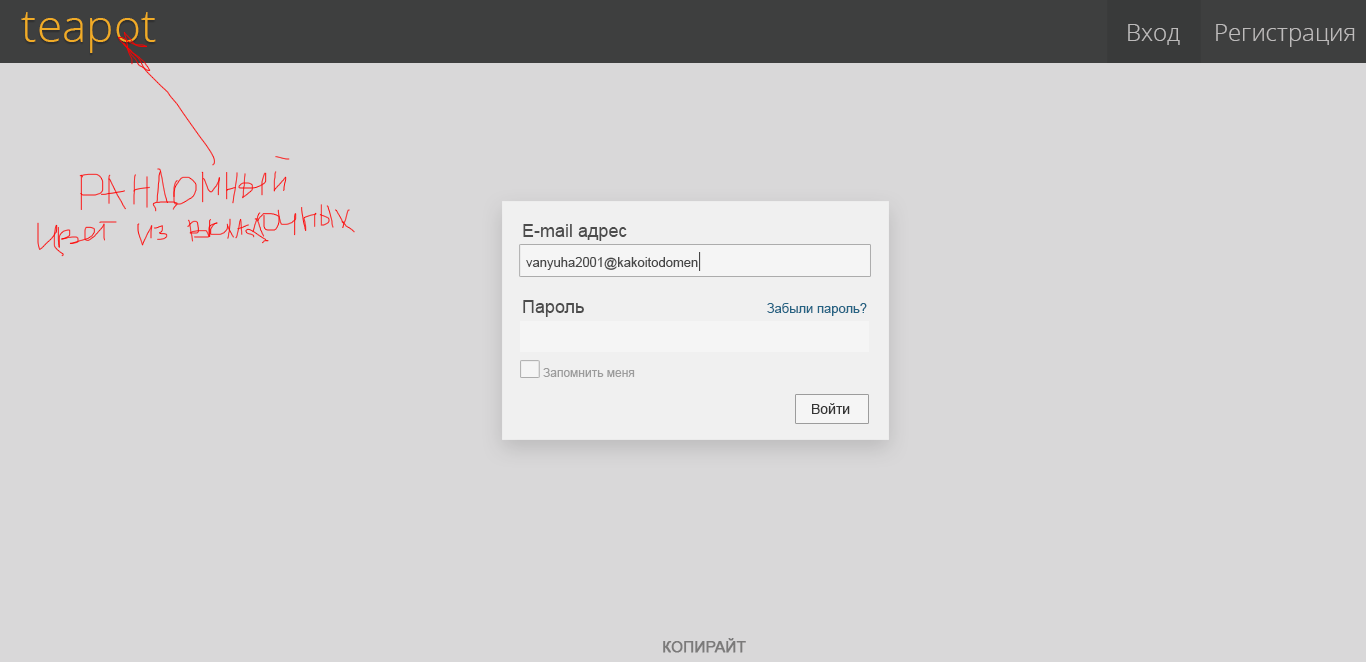
<style>
.page{position:relative;width:1366px;height:662px;background:#d9d8d9}
.page>*{position:absolute;margin:0}
.t1{font:46px "OpenSans-Light";color:#f0ab27}
.t2{font:24px "OpenSans-Light";color:#bdbbbb}
.t3{font:18px "ArialMT";color:#4c4c4c}
.t4{font:13px "ArialMT";color:#474747}
.t5{font:20px "ArialMT";color:#474747;scale:0.51 1}
.t6{font:13px "ArialMT";color:#266383}
.t7{font:12px "ArialMT";color:#9c9c9c}
.t8{font:14px "ArialMT";color:#343333}
.t9{font:15px "ArialMT";color:#7b7a7a;font-weight:bold}
</style>
<div class="page">
<p class="t1" style="left:21px;top:12px;width:135px;height:41px">teapot</p>
<p class="t2" style="left:1128px;top:24px;width:52px;height:21px">Вход</p>
<p class="t2" style="left:1216px;top:24px;width:139px;height:23px">Регистрация</p>
<p class="t3" style="left:523px;top:224px;width:104px;height:17px">E-mail адрес</p>
<p class="t4" style="left:526px;top:252px;width:175px;height:19px">vanyuha2001@kakoitodomen<span class="t5">|</span></p>
<p class="t3" style="left:523px;top:300px;width:61px;height:17px">Пароль</p>
<p class="t6" style="left:767px;top:303px;width:100px;height:13px">Забыли пароль?</p>
<p class="t7" style="left:543px;top:368px;width:92px;height:9px">Запомнить меня</p>
<p class="t8" style="left:812px;top:403px;width:38px;height:11px">Войти</p>
<p class="t9" style="left:663px;top:638px;width:83px;height:15px">КОПИРАЙТ</p>
</div>
